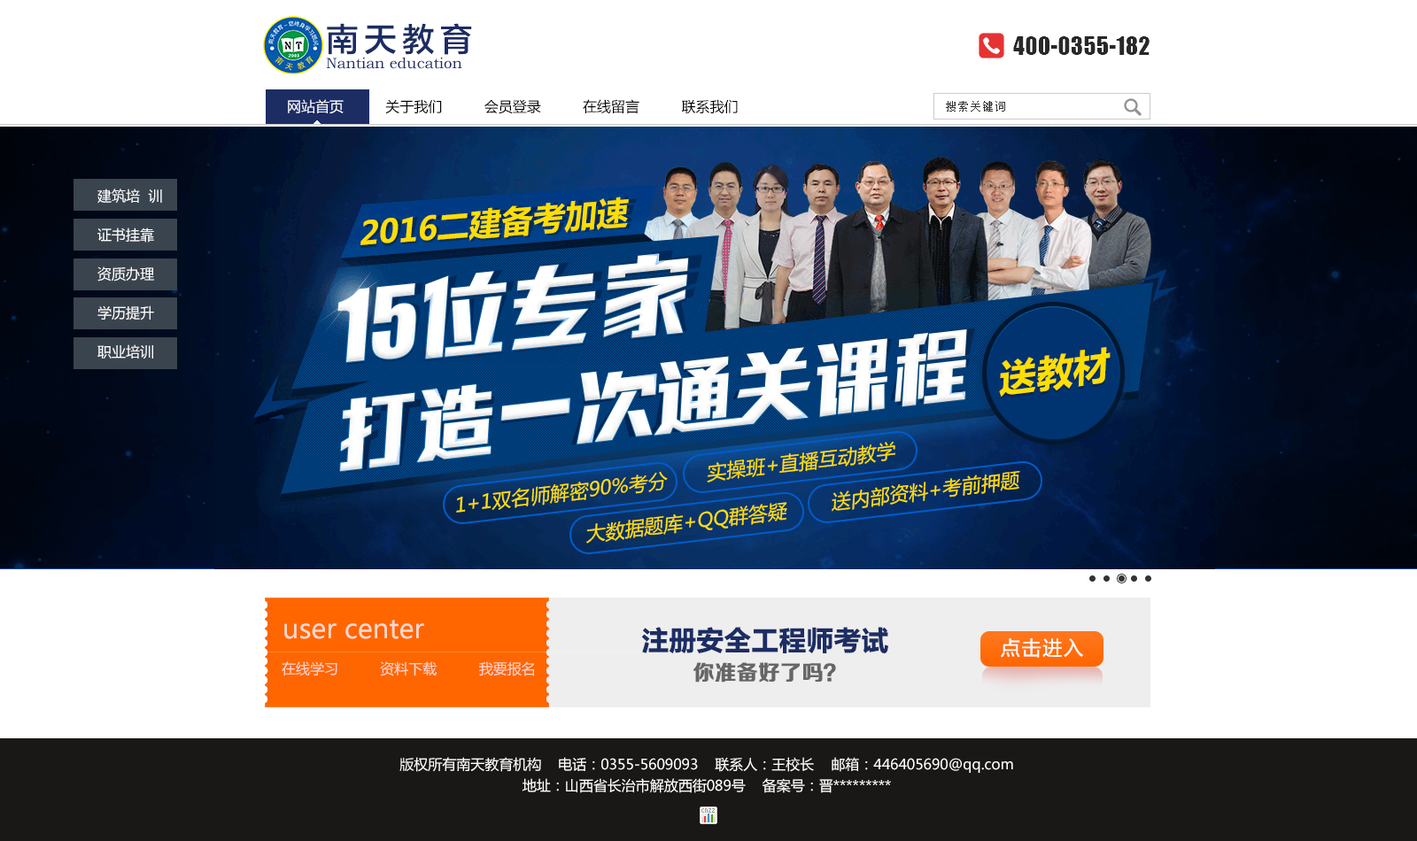
<style>
.page{position:relative;width:1417px;height:841px;background:#ffffff}
.page>*{position:absolute;margin:0}
.t1{font:32.8px "FZLTHDB_SC--GB1-4";letter-spacing:0.16em;color:#1c2d64}
.t2{font:15.1px "BookmanOldStyle";color:#1c2d64}
.t3{font:14.2px "MicrosoftYaHei";color:#000000}
.t4{font:14.2px "MicrosoftYaHei";color:#ffffff}
.t5{font:10.6px "SimSun";letter-spacing:0.16em;color:#333333}
.t6{font:14.2px/39px "MicrosoftYaHei";color:#ffffff}
.t7{font:26.6px "MicrosoftYaHei";color:#fcd9cf}
.t8{font:26.6px "MicrosoftYaHei-Bold";color:#1c2d64;font-weight:bold}
.t9{font:19.5px "MicrosoftYaHei";letter-spacing:0.08em;color:#ffffff}
.t10{font:14.2px "MicrosoftYaHei";color:#fcd9cf}
.t11{font:21.3px "FZZCHJW--GB1-0";color:#666666;font-weight:bold}
.t12{font:14.2px/21.3px "MicrosoftYaHei";color:#ffffff}
</style>
<div class="page">
<p class="t1" style="left:327px;top:23px;width:145px;height:32px">南天教育</p>
<p class="t2" style="left:326px;top:57px;width:136px;height:12px">Nantian education</p>
<p class="t3" style="left:288px;top:99px;width:450px;height:15px"><span class="t4">网站首页</span>          关于我们          会员登录          在线留言          联系我们</p>
<p class="t5" style="left:946px;top:101px;width:59px;height:11px">搜索关键词</p>
<p class="t6" style="left:97px;top:189px;width:65px;height:171px">建筑培  训<br>证书挂靠<br>资质办理<br>学历提升<br>职业培训</p>
<p class="t7" style="left:284px;top:620px;width:140px;height:19px">user center</p>
<p class="t8" style="left:641px;top:627px;width:247px;height:27px">注册安全工程师考试</p>
<p class="t9" style="left:1001px;top:639px;width:82px;height:19px">点击进入</p>
<p class="t10" style="left:282px;top:662px;width:252px;height:15px">在线学习          资料下载          我要报名</p>
<p class="t11" style="left:694px;top:663px;width:142px;height:20px">你准备好了吗？</p>
<p class="t12" style="left:399px;top:757px;width:614px;height:37px;text-align:center">版权所有南天教育机构    电话：0355-5609093    联系人：王校长    邮箱：446405690@qq.com<br>地址：山西省长治市解放西街089号    备案号：晋*********</p>
</div>
